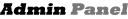
<style>
.page{position:relative;width:128px;height:19px;background:#ffffff}
.page>*{position:absolute;margin:0}
.t1{font:16.4px "Rockwell-ExtraBold";letter-spacing:0.01em;color:#030303;font-style:italic}
.t2{font:16.4px "Rockwell-ExtraBold";letter-spacing:0.01em;color:#777778;font-style:italic}
</style>
<div class="page">
<p class="t1" style="left:0px;top:3px;width:128px;height:12px">Admin <span class="t2">Panel</span></p>
</div>
